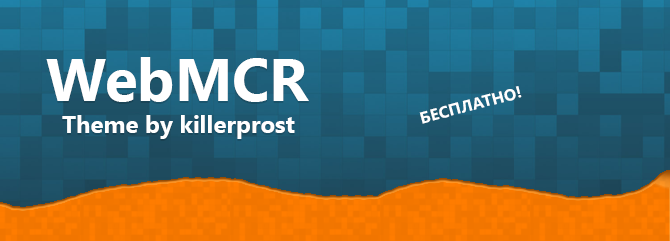
<style>
.page{position:relative;width:670px;height:241px}
.page>*{position:absolute;margin:0}
.t1{font:60px "SegoeUI-Bold";color:#ffffff}
.t2{font:16.3px "SegoeUI-Bold";color:#ffffff}
.t3{font:24px "SegoeUI-Bold";color:#ffffff}
</style>
<div class="page">
<p class="t1" style="left:46px;top:57px;width:263px;height:45px">WebMCR</p>
<p class="t2" style="left:419px;top:86px;width:103px;height:38px;rotate:-15deg">БЕСПЛАТНО!</p>
<p class="t3" style="left:62px;top:115px;width:233px;height:24px">Theme by killerprost</p>
</div>
